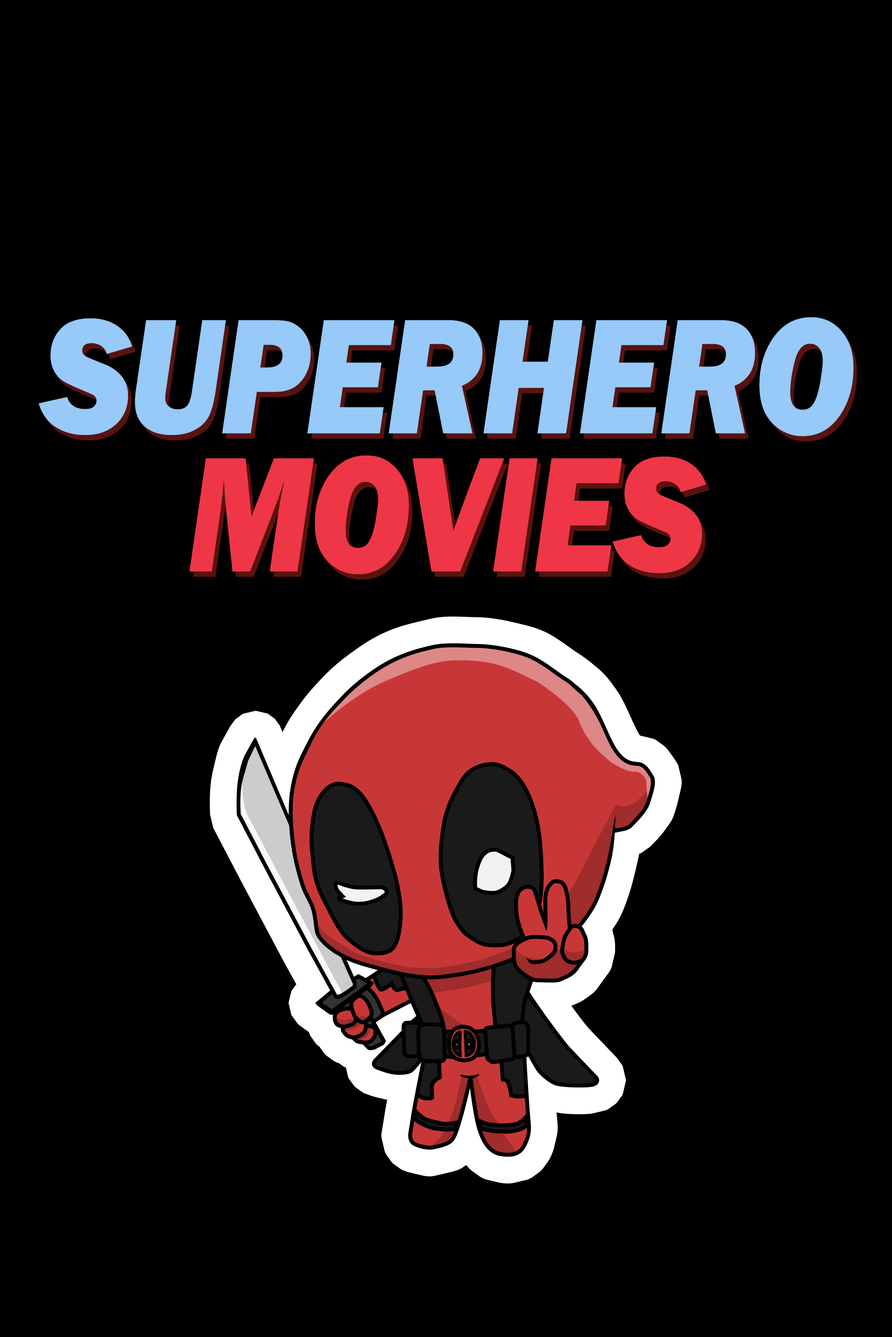
<style>
.page{position:relative;width:892px;height:1337px;background:#000000}
.page>*{position:absolute;margin:0}
.t1{font:169.5px "FranklinGothic-HeavyItalic";letter-spacing:-0.02em;color:#97c9f9;scale:0.87 1}
.t2{font:169.5px "FranklinGothic-HeavyItalic";letter-spacing:-0.02em;color:#ef3646;scale:0.87 1}
</style>
<div class="page">
<p class="t1" style="left:38px;top:317px;width:815px;height:119px">SUPERHERO</p>
<p class="t2" style="left:189px;top:456px;width:517px;height:119px">MOVIES</p>
</div>
